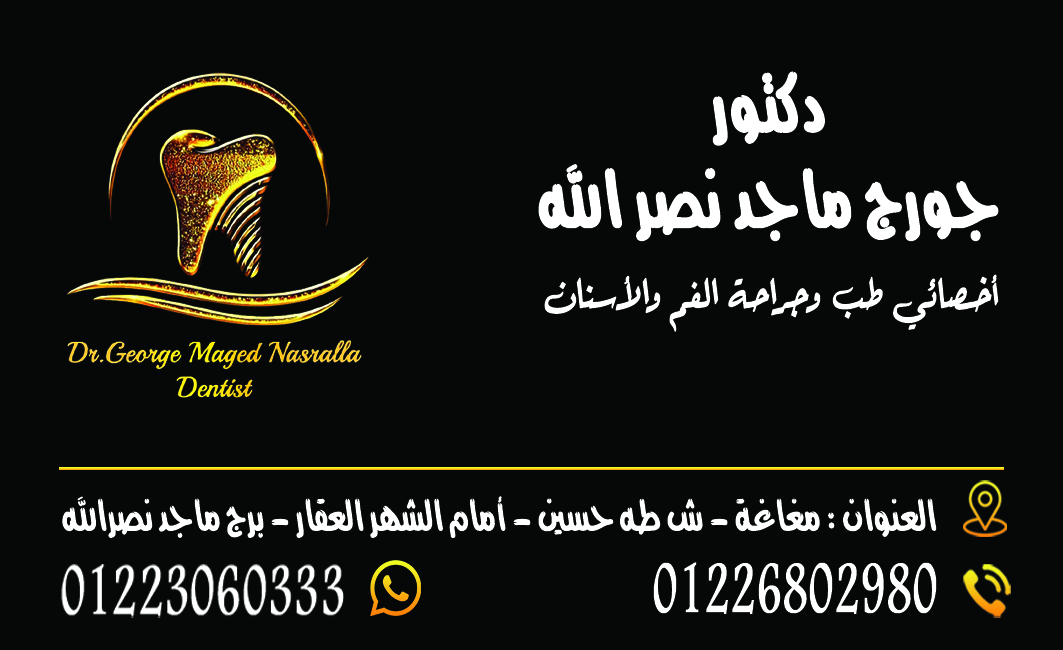
<style>
.page{position:relative;width:1063px;height:650px;background:#060808}
.page>*{position:absolute;margin:0}
.t1{font:47.9px/79.8px "Barada-Reqa";color:#ffffff;font-weight:bold;scale:0.76 1}
.t2{font:68.6px/95.4px "ÇáãÍÇÑÈ2 ÍÏíË";color:#ffffff;font-weight:bold;scale:0.91 1}
.t3{font:37.8px "ÇáãÍÇÑÈ2 ÍÏíË";color:#ffffff;scale:0.91 1}
.t4{font:75.7px "Sina-Bold";color:#ffffff;font-weight:bold;scale:0.59 1}
.t5{font:75.7px "ÇáãÍÇÑÈ2 ÍÏíË";color:#ffffff;font-weight:bold;scale:0.59 1}
</style>
<div class="page">
<p class="t1" style="left:538px;top:71px;width:461px;height:261px;text-align:center"><span class="t2">دكتور<br>جورج ماجد نصر الله<br></span>أخصائي طب وجراحة الفم والأسنان</p>
<p class="t3" style="left:62px;top:496px;width:875px;height:42px">العنوان : مغاغة - ش طه حسين - أمام الشهر العقار - برج ماجد نصرالله</p>
<p class="t4" style="left:61px;top:564px;width:283px;height:54px">01223060333</p>
<p class="t4" style="left:653px;top:562px;width:284px;height:52px"><span class="t5"> </span>01226802980</p>
</div>
